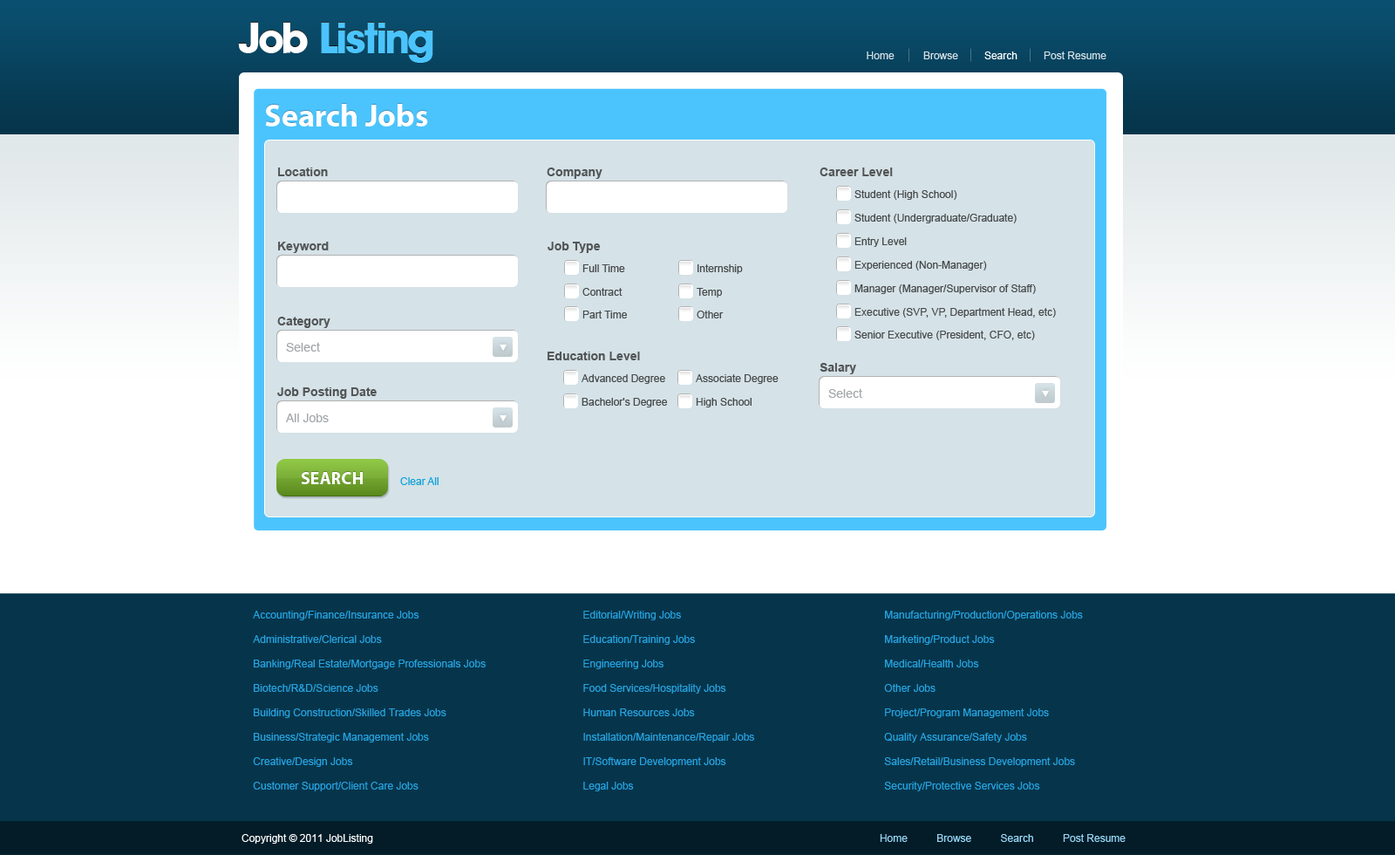
<style>
.page{position:relative;width:1395px;height:855px;background:#06354b}
.page>*{position:absolute;margin:0}
.t1{font:41.9px "AvantGBold";color:#4bc4fd}
.t2{font:41.9px "AvantGBold";color:#ffffff}
.t3{font:10.5px "ArialMT";color:#d5e2e7}
.t4{font:10.5px "ArialMT";color:#ffffff}
.t5{font:31.4px "MyriadPro-Bold";color:#eef2f4}
.t6{font:31.4px "MyriadPro-Bold";color:#ffffff}
.t7{font:12.2px "Arial-BoldMT";color:#535657}
.t8{font:10.5px "ArialMT";color:#474a4b}
.t9{font:12.2px "ArialMT";color:#a3a8aa}
.t10{font:17.4px "MyriadPro-Bold";color:#ffffff;text-transform:uppercase}
.t11{font:10.5px "ArialMT";color:#10a2d9}
.t12{font:10.5px/24.4px "ArialMT";color:#26a3e1}
.t13{font:10.5px "ArialMT";color:#98d9f8}
</style>
<div class="page">
<p class="t1" style="left:238px;top:22px;width:195px;height:40px"><span class="t2">Job </span>Listing</p>
<p class="t1" style="left:238px;top:23px;width:195px;height:40px"><span class="t2">Job </span>Listing</p>
<p class="t3" style="left:867px;top:51px;width:240px;height:8px">Home          Browse        <span class="t4"> Search </span>        Post Resume</p>
<p class="t5" style="left:265px;top:103px;width:163px;height:23px;opacity:0.35">Search Jobs</p>
<p class="t6" style="left:265px;top:104px;width:163px;height:22px">Search Jobs</p>
<p class="t7" style="left:278px;top:167px;width:50px;height:9px">Location</p>
<p class="t7" style="left:547px;top:167px;width:56px;height:12px">Company</p>
<p class="t7" style="left:820px;top:167px;width:73px;height:9px">Career Level</p>
<p class="t8" style="left:855px;top:190px;width:103px;height:10px">Student (High School)</p>
<p class="t8" style="left:855px;top:214px;width:162px;height:9px">Student (Undergraduate/Graduate)</p>
<p class="t7" style="left:278px;top:242px;width:51px;height:11px">Keyword</p>
<p class="t7" style="left:548px;top:242px;width:53px;height:11px">Job Type</p>
<p class="t8" style="left:855px;top:237px;width:52px;height:10px">Entry Level</p>
<p class="t8" style="left:583px;top:264px;width:42px;height:8px">Full Time</p>
<p class="t8" style="left:698px;top:264px;width:45px;height:10px">Internship</p>
<p class="t8" style="left:855px;top:261px;width:132px;height:9px">Experienced (Non-Manager)</p>
<p class="t8" style="left:583px;top:288px;width:40px;height:8px">Contract</p>
<p class="t8" style="left:697px;top:288px;width:25px;height:9px">Temp</p>
<p class="t8" style="left:855px;top:284px;width:181px;height:10px">Manager (Manager/Supervisor of Staff)</p>
<p class="t7" style="left:277px;top:317px;width:54px;height:11px">Category</p>
<p class="t8" style="left:583px;top:310px;width:44px;height:8px">Part Time</p>
<p class="t8" style="left:697px;top:310px;width:27px;height:8px">Other</p>
<p class="t8" style="left:855px;top:308px;width:201px;height:9px">Executive (SVP, VP, Department Head, etc)</p>
<p class="t9" style="left:286px;top:342px;width:34px;height:9px">Select</p>
<p class="t8" style="left:855px;top:331px;width:180px;height:9px">Senior Executive (President, CFO, etc)</p>
<p class="t7" style="left:548px;top:351px;width:92px;height:9px">Education Level</p>
<p class="t7" style="left:820px;top:363px;width:36px;height:11px">Salary</p>
<p class="t8" style="left:582px;top:374px;width:83px;height:10px">Advanced Degree</p>
<p class="t8" style="left:696px;top:374px;width:83px;height:10px">Associate Degree</p>
<p class="t7" style="left:277px;top:387px;width:100px;height:12px">Job Posting Date</p>
<p class="t9" style="left:828px;top:388px;width:34px;height:10px">Select</p>
<p class="t8" style="left:582px;top:398px;width:85px;height:9px">Bachelor's Degree</p>
<p class="t8" style="left:696px;top:398px;width:56px;height:9px">High School</p>
<p class="t9" style="left:286px;top:413px;width:43px;height:9px">All Jobs</p>
<p class="t10" style="left:301px;top:471px;width:62px;height:12px;opacity:0.34">Search</p>
<p class="t10" style="left:301px;top:472px;width:62px;height:12px">Search</p>
<p class="t11" style="left:400px;top:477px;width:39px;height:8px">Clear All</p>
<p class="t12" style="left:253px;top:610px;width:233px;height:181px">Accounting/Finance/Insurance Jobs<br>    Administrative/Clerical Jobs<br>    Banking/Real Estate/Mortgage Professionals Jobs<br>    Biotech/R&amp;D/Science Jobs<br>    Building Construction/Skilled Trades Jobs<br>    Business/Strategic Management Jobs<br>    Creative/Design Jobs<br>    Customer Support/Client Care Jobs</p>
<p class="t12" style="left:583px;top:610px;width:171px;height:181px">Editorial/Writing Jobs<br>    Education/Training Jobs<br>    Engineering Jobs<br>    Food Services/Hospitality Jobs<br>    Human Resources Jobs<br>    Installation/Maintenance/Repair Jobs<br>    IT/Software Development Jobs<br>    Legal Jobs</p>
<p class="t12" style="left:884px;top:610px;width:199px;height:181px">Manufacturing/Production/Operations Jobs<br>    Marketing/Product Jobs<br>    Medical/Health Jobs<br>    Other Jobs<br>    Project/Program Management Jobs<br>    Quality Assurance/Safety Jobs<br>    Sales/Retail/Business Development Jobs<br>    Security/Protective Services Jobs</p>
<p class="t4" style="left:242px;top:834px;width:131px;height:9px">Copyright © 2011 JobListing</p>
<p class="t13" style="left:880px;top:834px;width:246px;height:8px">Home          Browse          Search          Post Resume</p>
</div>
